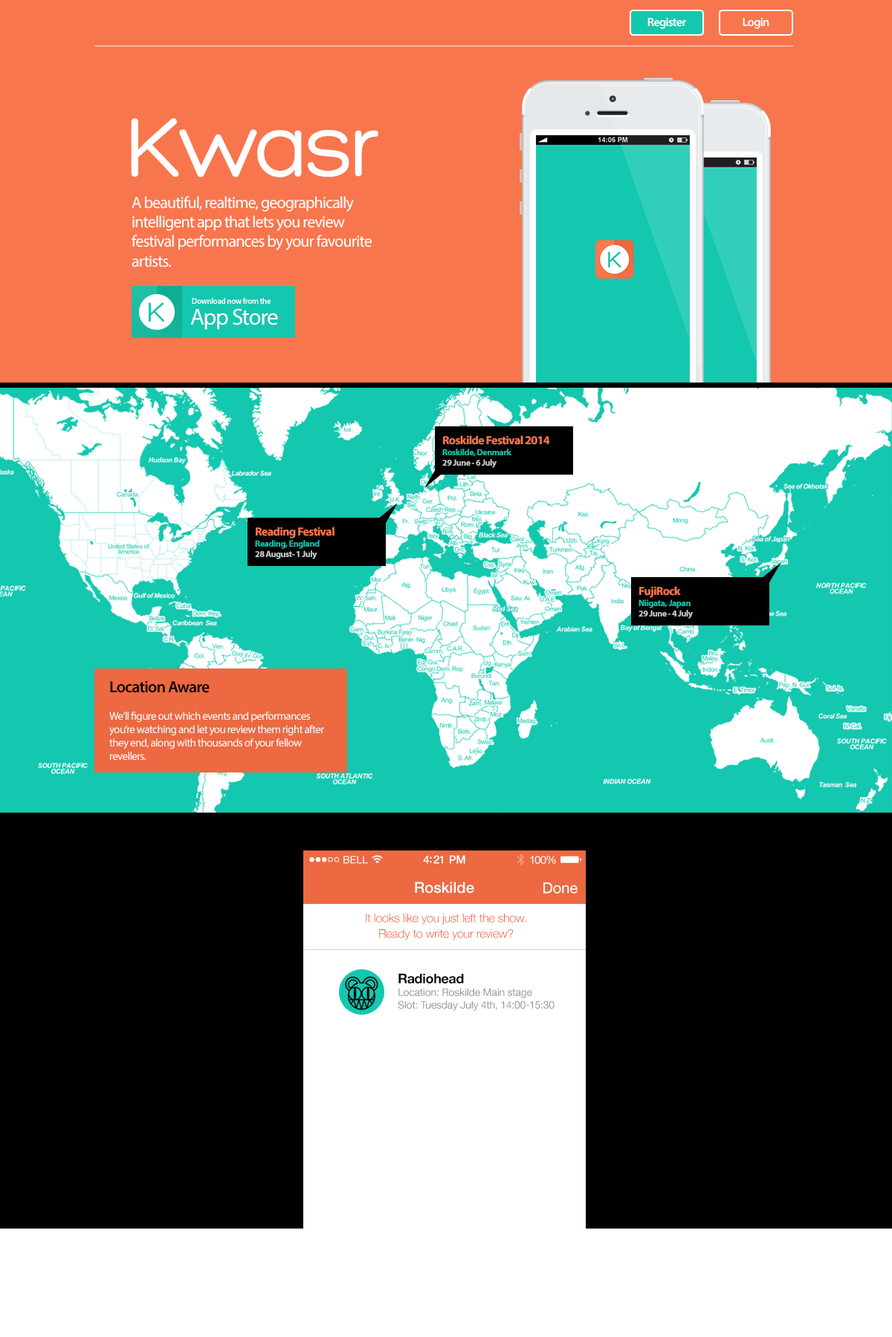
<style>
.page{position:relative;width:892px;height:1337px;background:#000000}
.page>*{position:absolute;margin:0}
.t1{font:11.9px "MyriadPro-Semibold";letter-spacing:-0.04em;color:#ffffff}
.t2{font:89.2px "Hero";letter-spacing:-0.04em;color:#ffffff}
.t3{font:16.3px "MyriadPro-Regular";letter-spacing:-0.04em;color:#ffffff}
.t4{font:29.7px "Hero";letter-spacing:-0.04em;color:#14c7af}
.t5{font:8.2px/20.8px "MyriadPro-Semibold";letter-spacing:-0.04em;color:#ffffff}
.t6{font:23px/20.8px "MyriadPro-Regular";letter-spacing:-0.04em;color:#ffffff}
.t7{font:11.9px "MyriadPro-Bold";letter-spacing:-0.04em;color:#f8764d}
.t8{font:8.9px "MyriadPro-Bold";letter-spacing:-0.04em;color:#14c7af}
.t9{font:8.9px "MyriadPro-Bold";letter-spacing:-0.04em;color:#cccccc}
.t10{font:11.1px "MyriadPro-Regular";letter-spacing:-0.04em;color:#ffffff}
.t11{font:16.3px "MyriadPro-Semibold";letter-spacing:-0.04em;color:#000000}
.t12{font:10.2px "HelveticaNeue";letter-spacing:0.02em;color:#ffffff}
.t13{font:11.1px "HelveticaNeue-Medium";letter-spacing:-0.02em;color:#ffffff}
.t14{font:10.6px "HelveticaNeue";letter-spacing:-0.02em;color:#ffffff}
.t15{font:15.1px "HelveticaNeue-Medium";color:#ffffff}
.t16{font:15.1px "HelveticaNeue";color:#ffffff}
.t17{font:11.9px/15.6px "HelveticaNeue-Light";letter-spacing:-0.02em;color:#ec6941}
.t18{font:10.4px/12.6px "HelveticaNeue";letter-spacing:-0.02em;color:#999999}
.t19{font:13.4px/17.1px "HelveticaNeue-Bold";letter-spacing:-0.02em;color:#000000}
</style>
<div class="page">
<p class="t1" style="left:647px;top:18px;width:39px;height:11px">Register</p>
<p class="t1" style="left:742px;top:18px;width:27px;height:11px">Login</p>
<p class="t2" style="left:131px;top:118px;width:247px;height:60px">Kwasr</p>
<p class="t3" style="left:132px;top:196px;width:240px;height:71px">A beautiful, realtime, geographically intelligent app that lets you review festival performances by your favourite artists.</p>
<p class="t4" style="left:149px;top:302px;width:15px;height:20px">K</p>
<p class="t5" style="left:190px;top:298px;width:88px;height:32px">Download now from the<br><span class="t6">App Store</span></p>
<p class="t7" style="left:442px;top:435px;width:108px;height:33px">Roskilde Festival 2014<br><span class="t8">Roskilde, Denmark<br></span><span class="t9">29 June - 6 July</span></p>
<p class="t9" style="left:255px;top:527px;width:79px;height:32px"><span class="t7">Reading Festival <br></span><span class="t8">Reading, England<br></span>28 August- 1 July</p>
<p class="t9" style="left:638px;top:586px;width:54px;height:33px"><span class="t7">FujiRock<br></span><span class="t8">Niigata, Japan<br></span>29 June - 4 July</p>
<p class="t10" style="left:109px;top:681px;width:215px;height:79px"><span class="t11">Location Aware<br><br></span>We’ll figure out which events and performances you’re watching and let you review them right after they end, along with thousands of your fellow revellers.</p>
<p class="t12" style="left:343px;top:856px;width:25px;height:8px">BELL</p>
<p class="t13" style="left:423px;top:855px;width:42px;height:9px">4:21 PM</p>
<p class="t14" style="left:530px;top:856px;width:26px;height:8px">100%</p>
<p class="t15" style="left:415px;top:882px;width:59px;height:12px">Roskilde</p>
<p class="t16" style="left:543px;top:883px;width:34px;height:11px">Done</p>
<p class="t17" style="left:366px;top:914px;width:160px;height:27px;text-align:center">It looks like you just left the show. <br>Ready to write your review?</p>
<p class="t18" style="left:398px;top:973px;width:156px;height:38px"><span class="t19">Radiohead<br></span>Location: Roskilde Main stage<br>Slot: Tuesday July 4th, 14:00-15:30</p>
</div>
